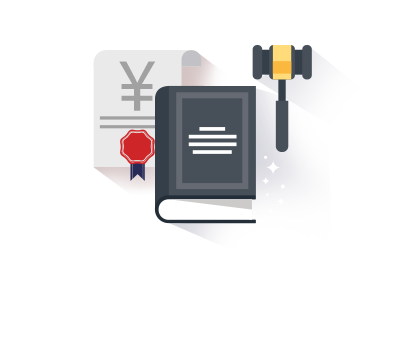
<style>
.page{position:relative;width:402px;height:357px;background:#ffffff}
.page>*{position:absolute;margin:0}
.t1{font:64.9px "MicrosoftYaHei";color:#a2a1a2}
</style>
<div class="page">
<p class="t1" style="left:119px;top:61px;width:37px;height:50px">￥</p>
</div>
